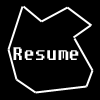
<style>
.page{position:relative;width:100px;height:100px;background:#000000}
.page>*{position:absolute;margin:0}
.t1{font:18px "Fixedsys";color:#ffffff}
</style>
<div class="page">
<p class="t1" style="left:13px;top:47px;width:66px;height:13px">Resume</p>
</div>
